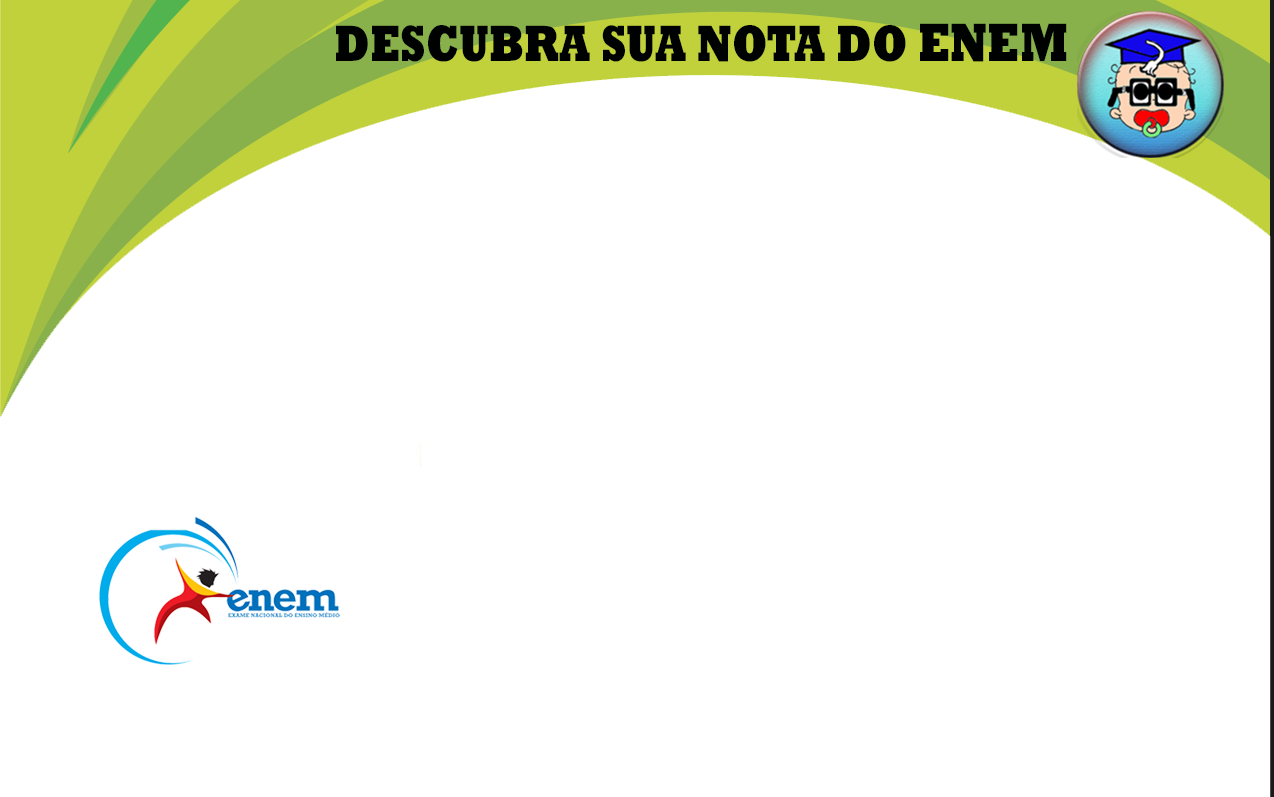
<style>
.page{position:relative;width:1274px;height:797px;background:#ffffff}
.page>*{position:absolute;margin:0}
.t1{font:52px "Rockwell-ExtraBold";color:#000202;scale:0.79 1}
.t2{font:55.1px "Rockwell-ExtraBold";color:#000202;scale:0.79 1}
</style>
<div class="page">
<p class="t1" style="left:336px;top:23px;width:731px;height:39px">DESCUBRA SUA NOTA DO <span class="t2">ENEM</span></p>
</div>
